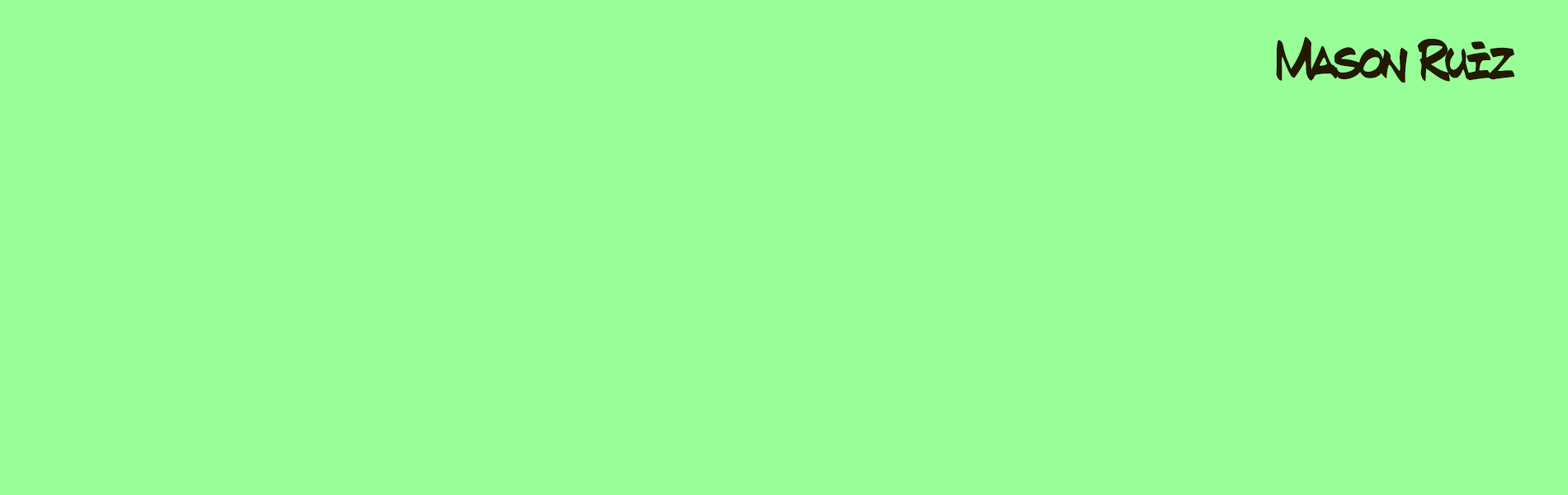
<style>
.page{position:relative;width:1568px;height:495px;background:#98ff98}
.page>*{position:absolute;margin:0}
.t1{font:59.4px "SubwayParisSC";color:#221a00}
</style>
<div class="page">
<p class="t1" style="left:1276px;top:36px;width:238px;height:47px">Mason Ruiz</p>
</div>
